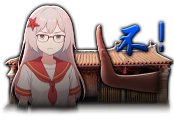
<style>
.page{position:relative;width:174px;height:140px;background:#ffffff}
.page>*{position:absolute;margin:0}
.t1{font:42.9px "STXingkai";letter-spacing:-0.1em}
.t2{font:42.9px "HYPixel-11px-U";letter-spacing:-0.1em}
</style>
<div class="page">
<p class="t1" style="left:116px;top:22px;width:48px;height:34px">不<span class="t2">！</span></p>
</div>
